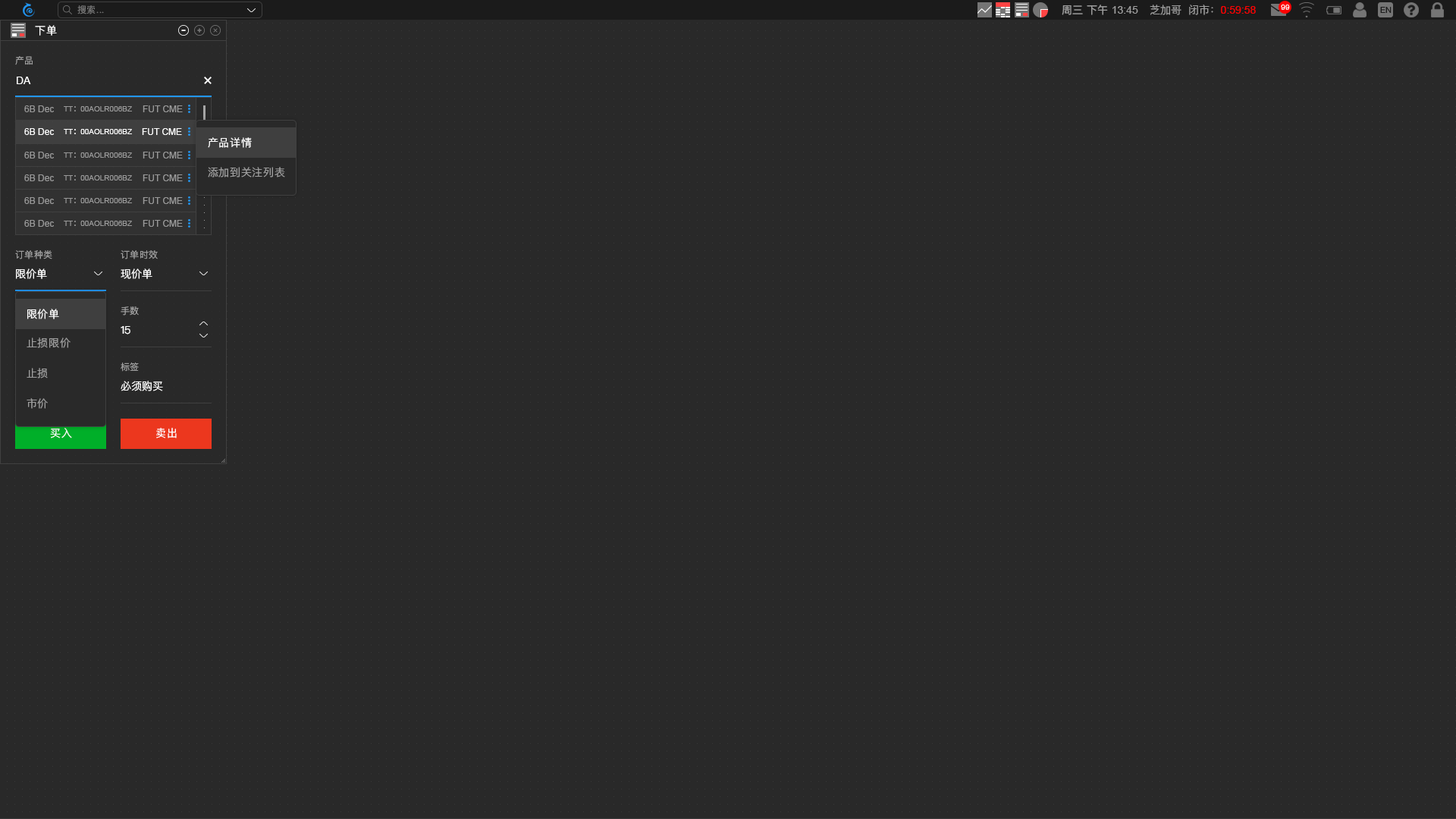
<style>
.page{position:relative;width:1456px;height:819px;background:#292929}
.page>*{position:absolute;margin:0}
.t1{font:9.1px "PingFangSC-Light";letter-spacing:0.05em;color:#757575;text-transform:uppercase}
.t2{font:10.6px "PingFangSC-Regular";color:#9e9e9e;text-transform:uppercase}
.t3{font:10.6px "ArialMT";color:#9e9e9e;text-transform:uppercase}
.t4{font:10.6px "PingFangSC-Light";color:#9e9e9e;text-transform:uppercase}
.t5{font:10.6px "ArialMT";color:#ff0000;text-transform:uppercase}
.t6{font:7.6px "ArialMT";color:#ffffff;text-transform:uppercase}
.t7{font:8.3px "PingFangSC-Regular";color:#1b1b1b;text-transform:uppercase}
.t8{font:10.6px "PingFangSC-Light";letter-spacing:0.05em;color:#ffffff;text-transform:uppercase}
.t9{font:9.1px "PingFangSC-Light";letter-spacing:0.05em;color:#9e9e9e;text-transform:uppercase}
.t10{font:10.6px "ArialMT";color:#ffffff}
.t11{font:9.1px "ArialMT";color:#999999}
.t12{font:7.6px "ArialMT";color:#999999}
.t13{font:7.6px "AdobeHeitiStd-Regular";color:#999999}
.t14{font:9.1px "ArialMT";color:#ffffff}
.t15{font:7.6px "ArialMT";color:#ffffff}
.t16{font:7.6px "AdobeHeitiStd-Regular";color:#ffffff}
.t17{font:10.6px "PingFangSC-Light";letter-spacing:0.05em;color:#9e9e9e;text-transform:uppercase}
.t18{font:10.6px "PingFangSC-Light";color:#ffffff}
</style>
<div class="page">
<p class="t1" style="left:77px;top:5px;width:27px;height:9px">搜索...</p>
<p class="t2" style="left:1062px;top:5px;width:76px;height:10px">周三 下午 <span class="t3">13:45</span></p>
<p class="t4" style="left:1150px;top:5px;width:106px;height:10px">芝加哥  闭市：<span class="t5">0:59:58</span></p>
<p class="t6" style="left:1281px;top:5px;width:9px;height:5px">99</p>
<p class="t7" style="left:1380px;top:7px;width:12px;height:6px">EN</p>
<p class="t8" style="left:35px;top:25px;width:22px;height:11px">下单</p>
<p class="t9" style="left:15px;top:56px;width:18px;height:9px">产品</p>
<p class="t10" style="left:17px;top:77px;width:14px;height:7px">DA</p>
<p class="t11" style="left:24px;top:105px;width:30px;height:7px">6B Dec</p>
<p class="t12" style="left:64px;top:106px;width:68px;height:5px">TT<span class="t13">：</span>00AOLR006BZ</p>
<p class="t11" style="left:143px;top:105px;width:40px;height:7px">FUT CME</p>
<p class="t14" style="left:24px;top:128px;width:30px;height:7px">6B Dec</p>
<p class="t15" style="left:64px;top:129px;width:68px;height:5px">TT<span class="t16">：</span>00AOLR006BZ</p>
<p class="t14" style="left:142px;top:128px;width:40px;height:7px">FUT CME</p>
<p class="t8" style="left:208px;top:137px;width:44px;height:11px">产品详情</p>
<p class="t11" style="left:24px;top:152px;width:30px;height:6px">6B Dec</p>
<p class="t12" style="left:64px;top:152px;width:68px;height:6px">TT<span class="t13">：</span>00AOLR006BZ</p>
<p class="t11" style="left:143px;top:152px;width:40px;height:6px">FUT CME</p>
<p class="t17" style="left:208px;top:167px;width:77px;height:10px">添加到关注列表</p>
<p class="t11" style="left:24px;top:174px;width:30px;height:7px">6B Dec</p>
<p class="t12" style="left:64px;top:175px;width:68px;height:5px">TT<span class="t13">：</span>00AOLR006BZ</p>
<p class="t11" style="left:143px;top:174px;width:40px;height:7px">FUT CME</p>
<p class="t11" style="left:24px;top:197px;width:30px;height:7px">6B Dec</p>
<p class="t12" style="left:64px;top:198px;width:68px;height:5px">TT<span class="t13">：</span>00AOLR006BZ</p>
<p class="t11" style="left:143px;top:197px;width:40px;height:7px">FUT CME</p>
<p class="t11" style="left:24px;top:220px;width:30px;height:7px">6B Dec</p>
<p class="t12" style="left:64px;top:221px;width:68px;height:5px">TT<span class="t13">：</span>00AOLR006BZ</p>
<p class="t11" style="left:143px;top:220px;width:40px;height:7px">FUT CME</p>
<p class="t9" style="left:15px;top:250px;width:37px;height:9px">订单种类</p>
<p class="t9" style="left:121px;top:250px;width:37px;height:9px">订单时效</p>
<p class="t18" style="left:16px;top:268px;width:31px;height:11px">限价单</p>
<p class="t18" style="left:121px;top:268px;width:31px;height:11px">现价单</p>
<p class="t8" style="left:27px;top:309px;width:32px;height:10px">限价单</p>
<p class="t9" style="left:121px;top:306px;width:18px;height:9px">手数</p>
<p class="t18" style="left:121px;top:326px;width:9px;height:8px">15</p>
<p class="t17" style="left:27px;top:337px;width:44px;height:11px">止损限价</p>
<p class="t9" style="left:121px;top:362px;width:18px;height:10px">标签</p>
<p class="t17" style="left:27px;top:368px;width:21px;height:10px">止损</p>
<p class="t18" style="left:121px;top:381px;width:42px;height:10px">必须购买</p>
<p class="t17" style="left:27px;top:398px;width:21px;height:11px">市价</p>
<p class="t8" style="left:50px;top:428px;width:22px;height:10px">买入</p>
<p class="t8" style="left:156px;top:428px;width:21px;height:10px">卖出</p>
</div>
